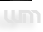
<style>
.page{position:relative;width:43px;height:32px;background:#ffffff}
.page>*{position:absolute;margin:0}
.t1{font:18.8px "PerfectDark(BRK)";color:#e3e3e3}
</style>
<div class="page">
<p class="t1" style="left:4px;top:10px;width:37px;height:13px">wm</p>
</div>
